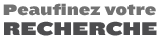
<style>
.page{position:relative;width:160px;height:39px;background:#ffffff}
.page>*{position:absolute;margin:0}
.t1{font:15.9px/20px "Knockout-94UltmtSumo";letter-spacing:0.015em;color:#727272}
.t2{font:19px/20px "Knockout-94UltmtSumo";color:#4d4d4f;text-transform:uppercase}
</style>
<div class="page">
<p class="t1" style="left:3px;top:3px;width:154px;height:33px">Peaufinez votre <br><span class="t2">recherche</span></p>
</div>
